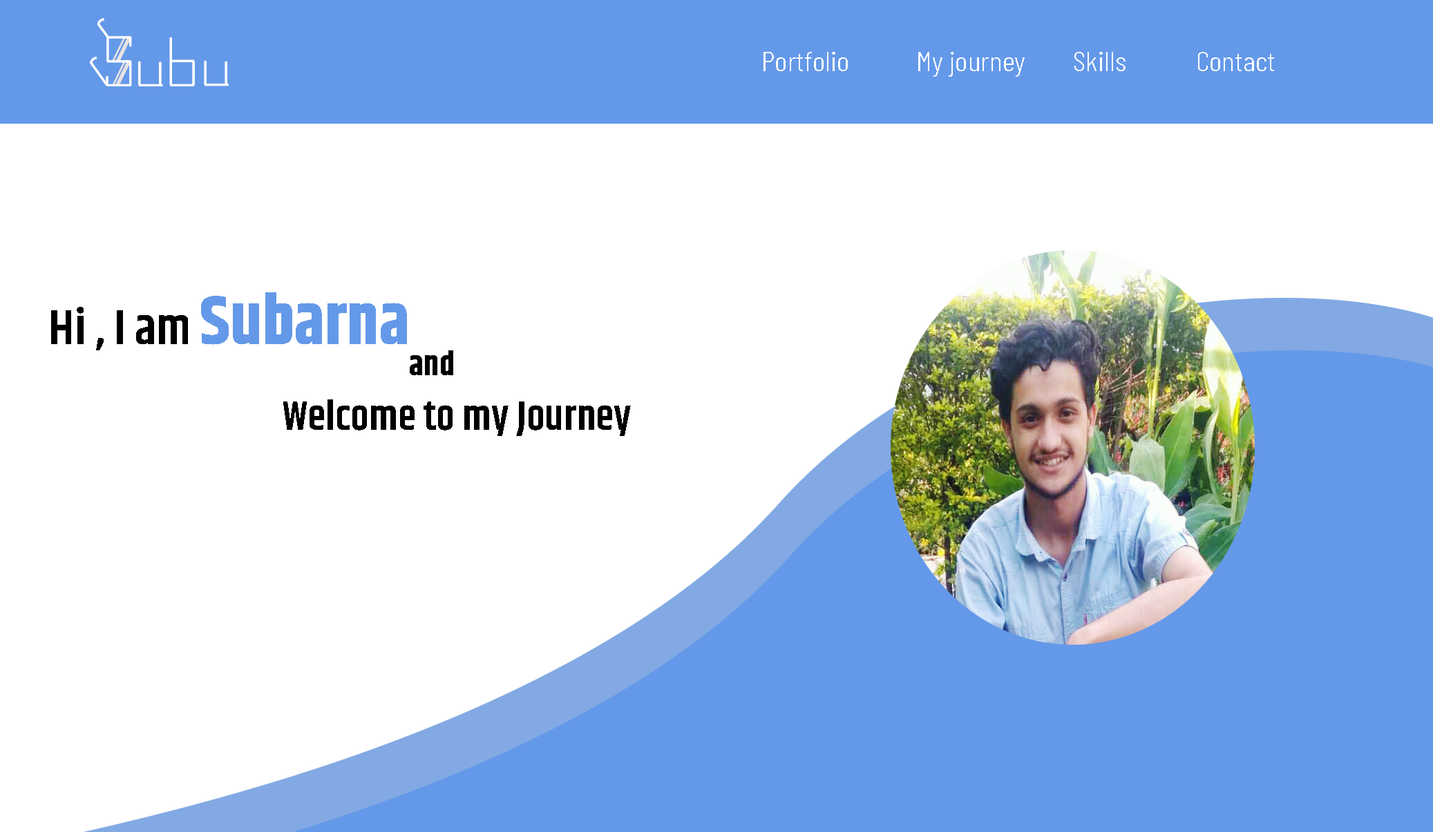
<style>
.page{position:relative;width:1433px;height:832px;background:#ffffff}
.page>*{position:absolute;margin:0}
.t1{font:27px "BarlowCondensed-Light";color:#ffffff;scale:1.15 1}
.t2{font:49.8px "Khand-SemiBold";color:#000000}
.t3{font:69.1px "Khand-Bold";color:#6499e9}
.t4{font:33.2px "Khand-Bold";color:#000000}
.t5{font:41.5px "Khand-SemiBold";color:#000000}
</style>
<div class="page">
<p class="t1" style="left:764px;top:52px;width:84px;height:19px">Portfolio</p>
<p class="t1" style="left:918px;top:52px;width:107px;height:25px">My journey</p>
<p class="t1" style="left:1075px;top:52px;width:51px;height:19px">Skills</p>
<p class="t1" style="left:1198px;top:52px;width:76px;height:19px">Contact</p>
<p class="t2" style="left:51px;top:292px;width:356px;height:58px">Hi , I am <span class="t3">Subarna</span></p>
<p class="t4" style="left:410px;top:350px;width:43px;height:25px">and</p>
<p class="t5" style="left:283px;top:399px;width:348px;height:37px">Welcome to my Journey</p>
</div>
